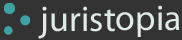
<style>
.page{position:relative;width:182px;height:40px;background:#333333}
.page>*{position:absolute;margin:0}
.t1{font:36px "MyriadPro-Regular";color:#dfece6}
</style>
<div class="page">
<p class="t1" style="left:38px;top:5px;width:142px;height:34px">juristopia</p>
</div>
